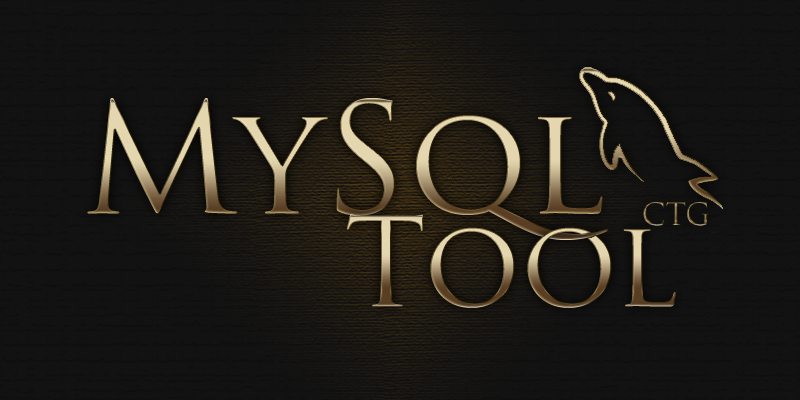
<style>
.page{position:relative;width:800px;height:400px;background:#121212}
.page>*{position:absolute;margin:0}
.t1{font:150px "TrajanPro-Regular"}
.t2{font:30px "TrajanPro-Regular"}
</style>
<div class="page">
<p class="t1" style="left:87px;top:98px;width:522px;height:142px">MySql</p>
<p class="t2" style="left:643px;top:202px;width:66px;height:24px">CTG</p>
</div>
